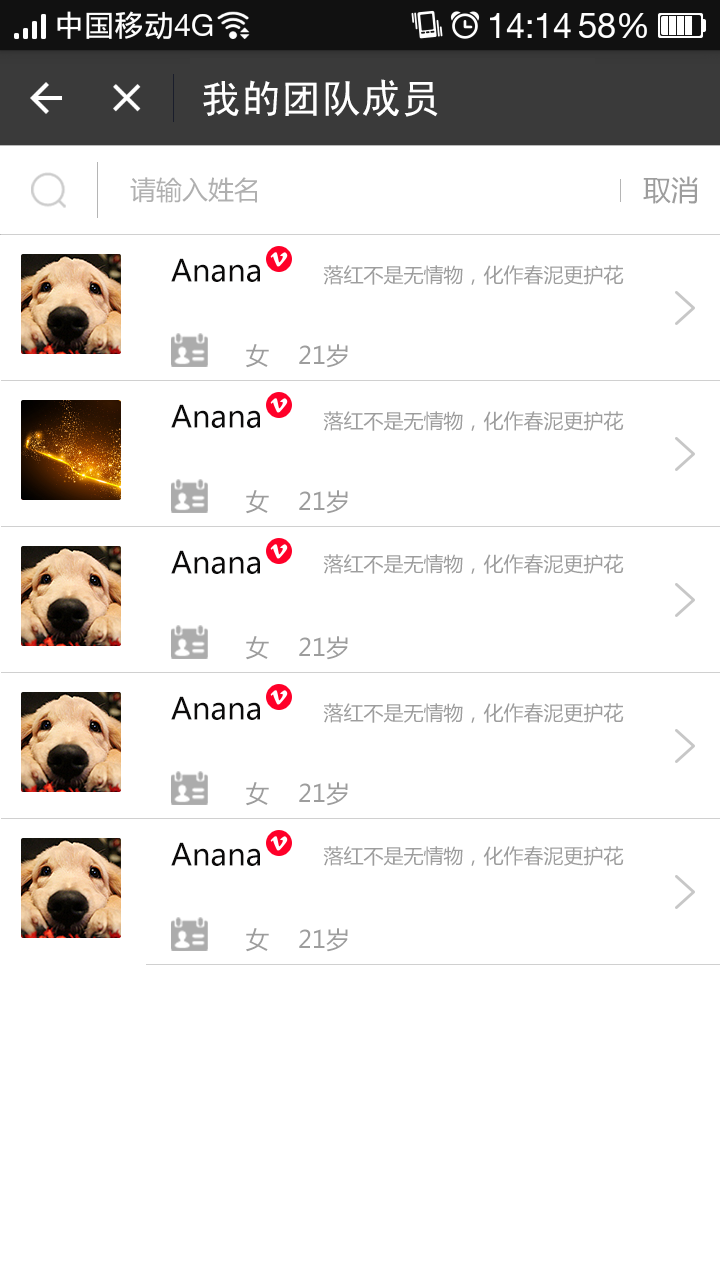
<style>
.page{position:relative;width:720px;height:1280px;background:#ffffff}
.page>*{position:absolute;margin:0}
.t1{font:40px "SimHei";color:#ffffff}
.t2{font:26px "MicrosoftYaHei";color:#b0b0b0}
.t3{font:28px "MicrosoftYaHei";color:#9d9d9d}
.t4{font:30px "MicrosoftYaHei";color:#0c0b0b}
.t5{font:20px "MicrosoftYaHei";color:#9d9d9d}
.t6{font:24px "MicrosoftYaHei";color:#9d9d9d}
</style>
<div class="page">
<p class="t1" style="left:203px;top:79px;width:235px;height:38px">我的团队成员</p>
<p class="t2" style="left:130px;top:177px;width:127px;height:26px">请输入姓名</p>
<p class="t3" style="left:643px;top:176px;width:55px;height:28px">取消</p>
<p class="t4" style="left:171px;top:258px;width:89px;height:24px">Anana</p>
<p class="t5" style="left:323px;top:265px;width:301px;height:20px">落红不是无情物，化作春泥更护花</p>
<p class="t6" style="left:246px;top:344px;width:102px;height:24px">女    21岁</p>
<p class="t4" style="left:171px;top:404px;width:89px;height:24px">Anana</p>
<p class="t5" style="left:323px;top:411px;width:301px;height:20px">落红不是无情物，化作春泥更护花</p>
<p class="t6" style="left:246px;top:490px;width:102px;height:24px">女    21岁</p>
<p class="t4" style="left:171px;top:550px;width:89px;height:24px">Anana</p>
<p class="t5" style="left:323px;top:554px;width:301px;height:20px">落红不是无情物，化作春泥更护花</p>
<p class="t6" style="left:246px;top:636px;width:102px;height:24px">女    21岁</p>
<p class="t4" style="left:171px;top:696px;width:89px;height:24px">Anana</p>
<p class="t5" style="left:323px;top:703px;width:301px;height:20px">落红不是无情物，化作春泥更护花</p>
<p class="t6" style="left:246px;top:782px;width:102px;height:24px">女    21岁</p>
<p class="t4" style="left:171px;top:842px;width:89px;height:24px">Anana</p>
<p class="t5" style="left:323px;top:846px;width:301px;height:20px">落红不是无情物，化作春泥更护花</p>
<p class="t6" style="left:246px;top:928px;width:102px;height:24px">女    21岁</p>
</div>
